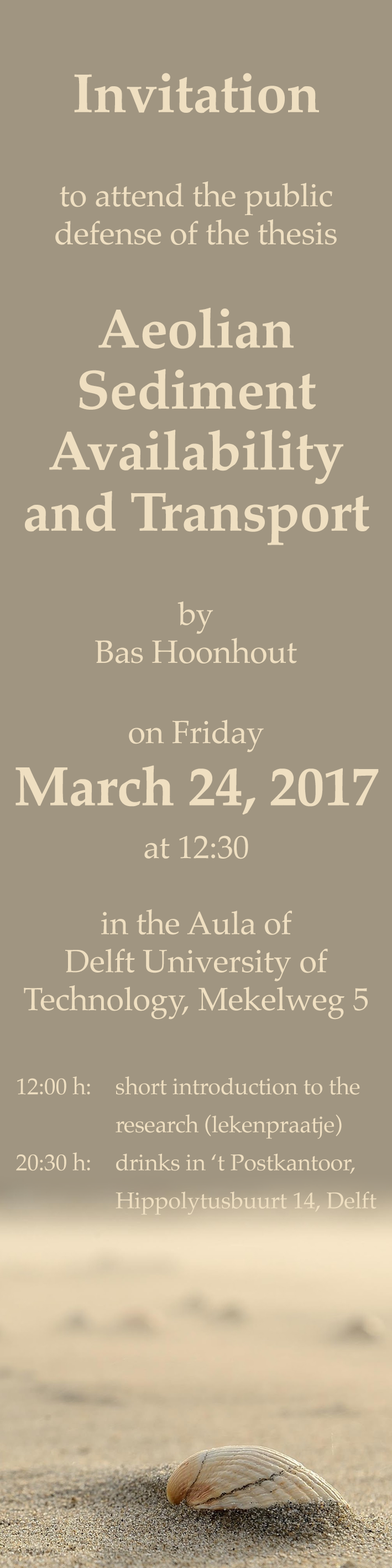
<style>
.page{position:relative;width:392px;height:1568px;background:#a09581}
.page>*{position:absolute;margin:0}
.t1{font:55.3px "Palatino-Bold";letter-spacing:-0.007em;color:#efdfc1}
.t2{font:32.2px/18.4px "Palatino-Roman";letter-spacing:-0.007em;color:#efdfc1}
.t3{font:55.3px/41.5px "Palatino-Bold";letter-spacing:-0.007em;color:#efdfc1}
.t4{font:32.3px "Palatino-Roman";letter-spacing:-0.007em;color:#efdfc1}
.t5{font:32.3px/18.4px "Palatino-Roman";letter-spacing:-0.007em;color:#efdfc1}
.t6{font:23px/18.4px "Palatino-Roman";letter-spacing:-0.007em;color:#efdfc1}
</style>
<div class="page">
<p class="t1" style="left:74px;top:73px;width:245px;height:40px">Invitation</p>
<p class="t2" style="left:55px;top:181px;width:282px;height:64px;text-align:center">to attend the public<br>defense of the thesis</p>
<p class="t3" style="left:25px;top:307px;width:344px;height:238px;text-align:center">Aeolian<br>Sediment<br>Availability<br>and Transport</p>
<p class="t2" style="left:95px;top:601px;width:202px;height:62px;text-align:center">by<br>Bas Hoonhout</p>
<p class="t4" style="left:129px;top:719px;width:135px;height:33px">on Friday</p>
<p class="t1" style="left:15px;top:765px;width:364px;height:50px">March 24, 2017</p>
<p class="t5" style="left:24px;top:835px;width:344px;height:185px;text-align:center">at 12:30<br><br>in the Aula of<br>Delft University of<br>Technology, Mekelweg 5</p>
<p class="t6" style="left:16px;top:1076px;width:361px;height:139px">12:00 h:  short introduction to the<br>     research (lekenpraatje)<br>20:30 h:  drinks in ‘t Postkantoor,<br>     Hippolytusbuurt 14, Delft</p>
</div>
